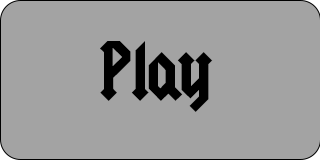
<style>
.page{position:relative;width:320px;height:160px;background:#a3a3a3}
.page>*{position:absolute;margin:0}
.t1{font:72px "Squealer-Regular";color:#000000}
</style>
<div class="page">
<p class="t1" style="left:100px;top:41px;width:113px;height:71px">Play</p>
</div>
